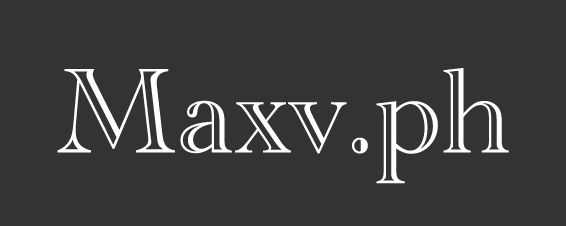
<style>
.page{position:relative;width:566px;height:226px;background:#333333}
.page>*{position:absolute;margin:0}
.t1{font:125px "AcademyEngravedLetPlain";color:#ffffff}
</style>
<div class="page">
<p class="t1" style="left:57px;top:68px;width:452px;height:116px">Maxv.ph</p>
</div>
